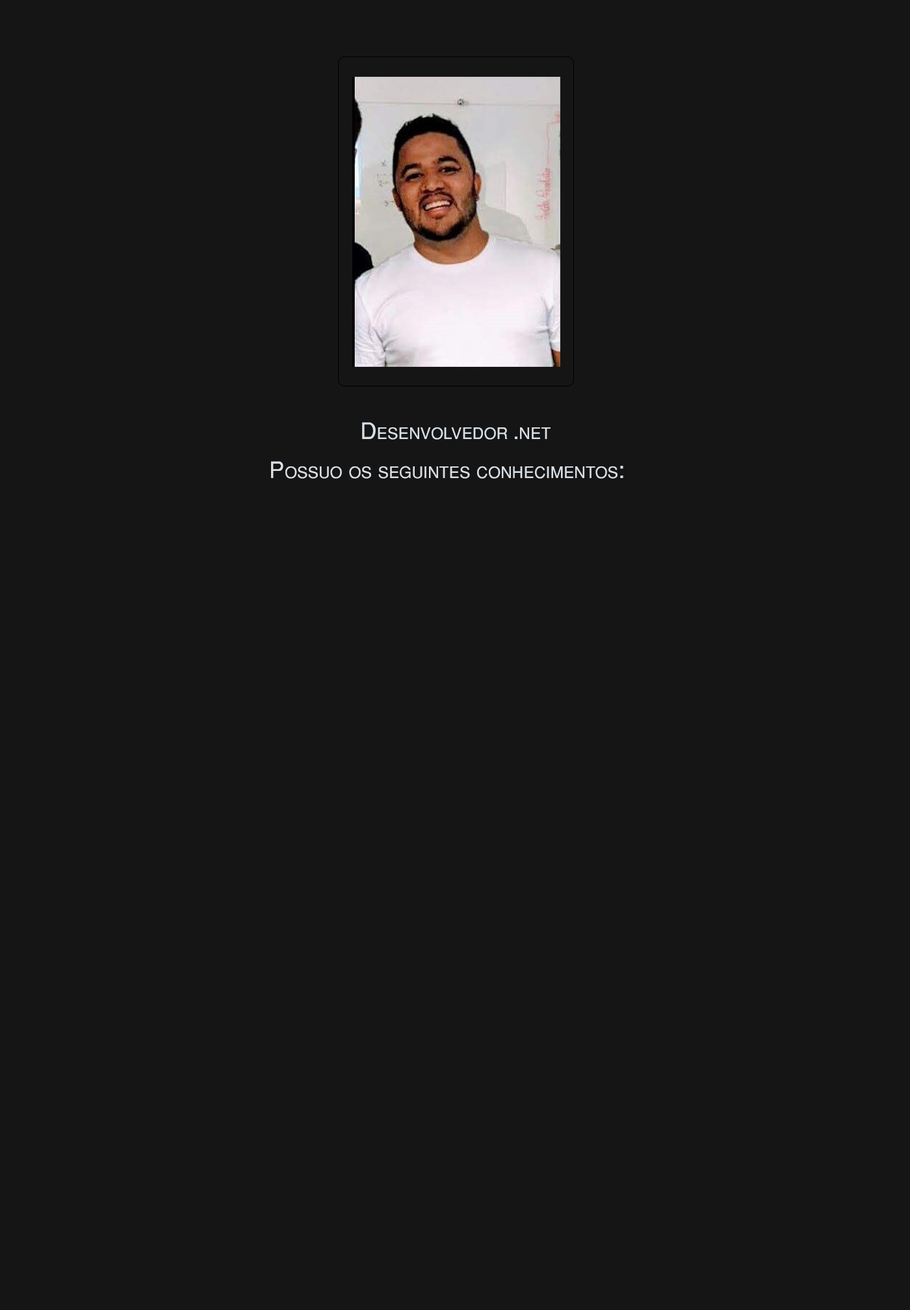
<style>
.page{position:relative;width:910px;height:1310px;background:#151515}
.page>*{position:absolute;margin:0}
.t1{font:22.8px/19.5px "Helvetica-Normal";color:#d9e0e6;font-variant:small-caps}
</style>
<div class="page">
<p class="t1" style="left:271px;top:422px;width:353px;height:57px;text-align:center">Desenvolvedor .net<br><br>Possuo os seguintes conhecimentos:</p>
</div>
